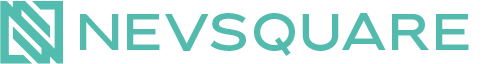
<style>
.page{position:relative;width:484px;height:64px;background:#ffffff}
.page>*{position:absolute;margin:0}
.t1{font:52.1px "FiresideDEMO";letter-spacing:0.017em;color:#52bcaf}
</style>
<div class="page">
<p class="t1" style="left:80px;top:13px;width:389px;height:43px">NEVSQUARE</p>
</div>
